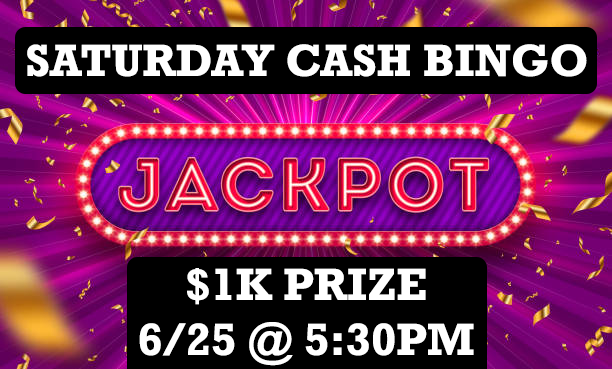
<style>
.page{position:relative;width:612px;height:369px;background:#000000}
.page>*{position:absolute;margin:0}
.t1{font:45.8px "Rockwell-Bold";color:#ffffff}
</style>
<div class="page">
<p class="t1" style="left:27px;top:44px;width:560px;height:33px">SATURDAY CASH BINGO</p>
<p class="t1" style="left:139px;top:268px;width:335px;height:98px;text-align:center">$1K PRIZE<br>6/25 @ 5:30PM</p>
</div>
